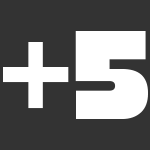
<style>
.page{position:relative;width:150px;height:150px;background:#333333}
.page>*{position:absolute;margin:0}
.t1{font:125px "StrenuousBl-Regular";color:#ffffff}
</style>
<div class="page">
<p class="t1" style="left:3px;top:31px;width:145px;height:88px">+5</p>
</div>
